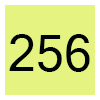
<style>
.page{position:relative;width:100px;height:100px;background:#e5f481}
.page>*{position:absolute;margin:0}
.t1{font:50px "MicrosoftSansSerif";color:#000407}
</style>
<div class="page">
<p class="t1" style="left:9px;top:34px;width:81px;height:38px">256</p>
</div>
